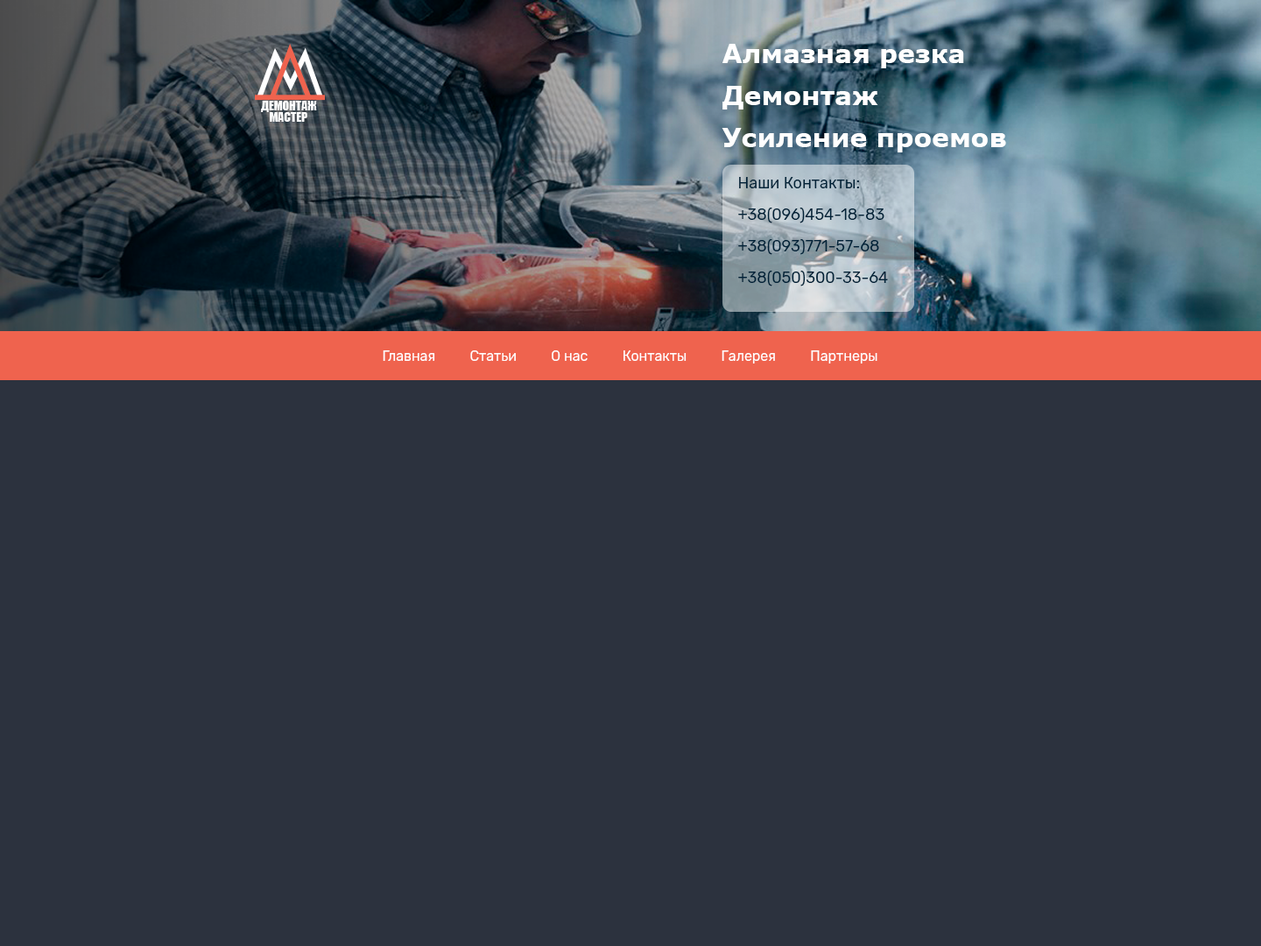
<style>
.page{position:relative;width:1261px;height:946px;background:#2c323e}
.page>*{position:absolute;margin:0}
.t1{font:26.3px/42px "Verdana-Bold";color:#ffffff}
.t2{font:26.3px/15.8px "Verdana-Bold";color:#ffffff}
.t3{font:15.8px/15.8px "Rubik-Regular";color:#002238}
.t4{font:14px "Rubik-Regular";color:#ffffff}
</style>
<div class="page">
<p class="t1" style="left:722px;top:44px;width:284px;height:108px"><span class="t2">Алмазная резка<br></span>Демонтаж<br>Усиление проемов</p>
<p class="t3" style="left:738px;top:177px;width:150px;height:109px">Наши Контакты:<br><br>+38(096)454-18-83<br><br>+38(093)771-57-68<br><br>+38(050)300-33-64</p>
<p class="t4" style="left:383px;top:350px;width:494px;height:13px">Главная          Статьи          О нас          Контакты          Галерея          Партнеры</p>
</div>
